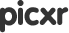
<style>
.page{position:relative;width:69px;height:33px;background:#ffffff}
.page>*{position:absolute;margin:0}
.t1{font:32px "VAGRoundedBlackSSiBlack";letter-spacing:-0.01em;color:#333333}
.t2{font:32px "VAGRoundedBlackSSiBlack";letter-spacing:0.05em;color:#333333}
.t3{font:32px "VAGRoundedBlackSSiBlack";letter-spacing:0.005em;color:#333333}
.t4{font:32px "VAGRoundedBlackSSiBlack";letter-spacing:-0.025em;color:#333333}
</style>
<div class="page">
<p class="t1" style="left:0px;top:0px;width:69px;height:33px">pi<span class="t2">c</span><span class="t3">x</span><span class="t4">r</span></p>
</div>
